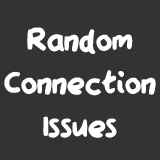
<style>
.page{position:relative;width:160px;height:160px;background:#333333}
.page>*{position:absolute;margin:0}
.t1{font:35.9px "QAReports";color:#ffffff}
</style>
<div class="page">
<p class="t1" style="left:4px;top:27px;width:152px;height:111px;text-align:center">Random<br>Connection<br>Issues</p>
</div>
